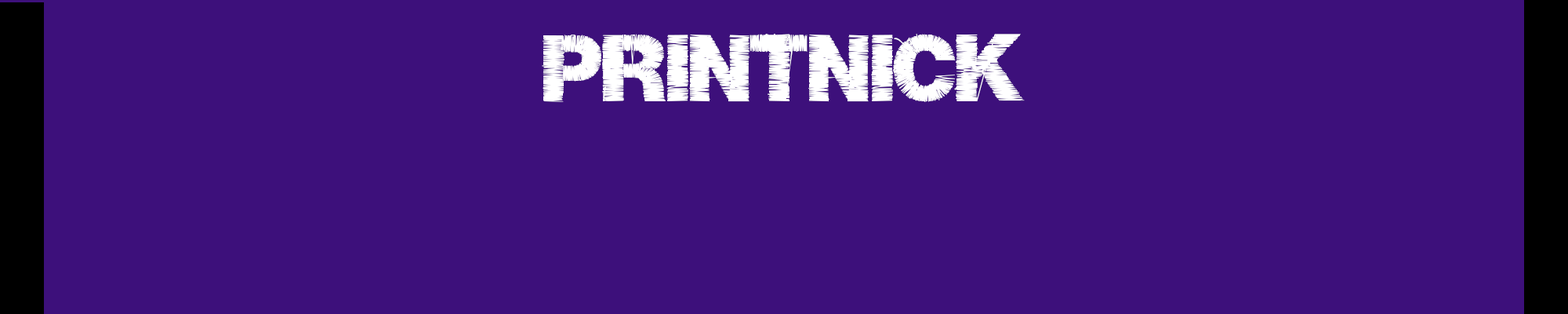
<style>
.page{position:relative;width:1568px;height:314px;background:#3d107b}
.page>*{position:absolute;margin:0}
.t1{font:83.6px "Base05";color:#ffffff}
</style>
<div class="page">
<p class="t1" style="left:542px;top:33px;width:483px;height:69px">printnick</p>
</div>
